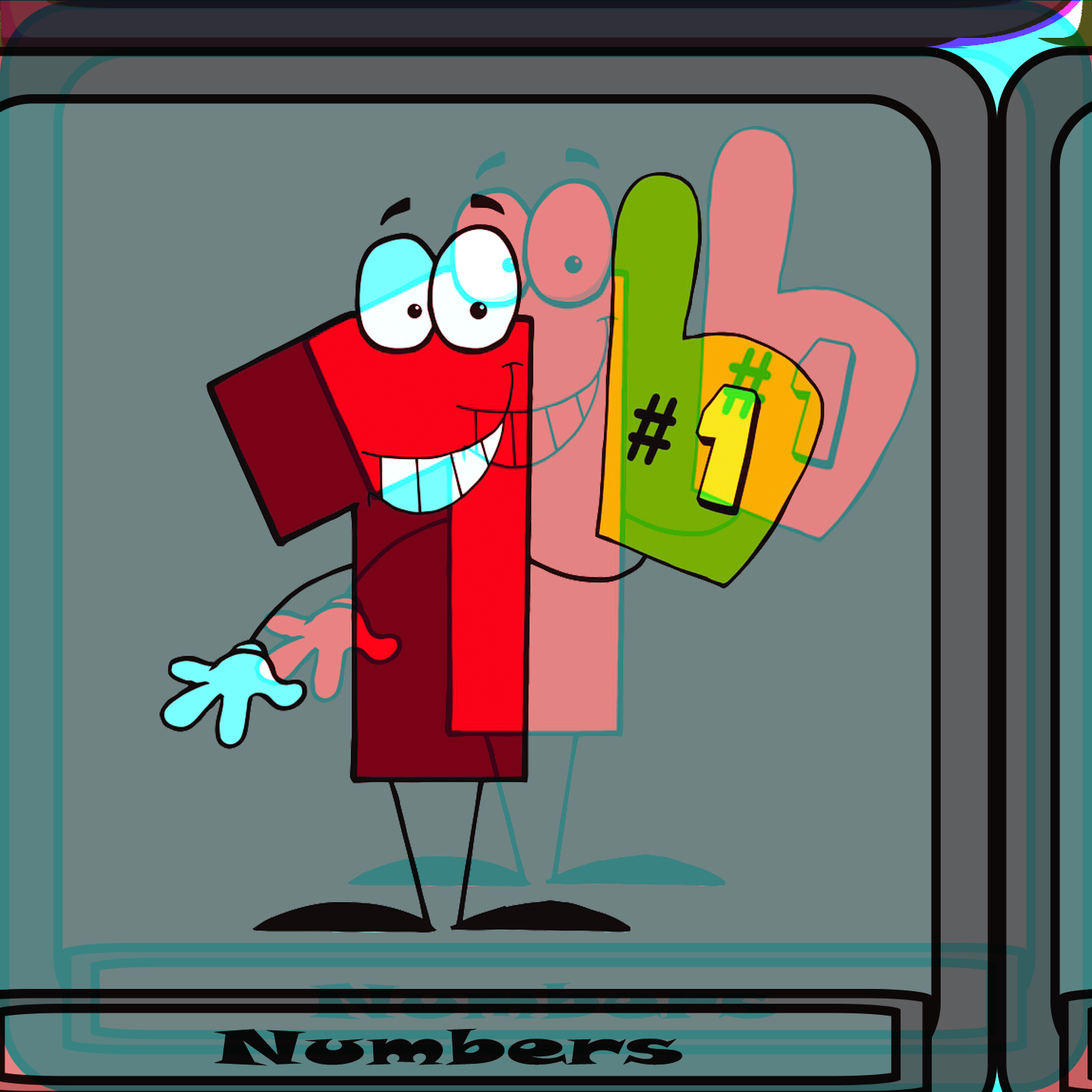
<style>
.page{position:relative;width:1092px;height:1092px;background:#6f8383}
.page>*{position:absolute;margin:0}
.t1{font:48.2px "SnapITC-Regular";scale:2 1}
</style>
<div class="page">
<p class="t1" style="left:309px;top:981px;width:468px;height:38px">Numbers</p>
</div>
